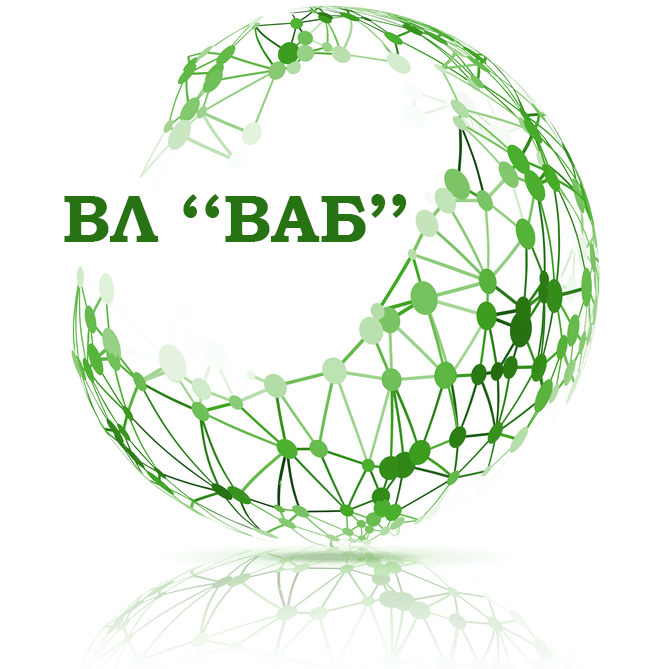
<style>
.page{position:relative;width:669px;height:669px;background:#ffffff}
.page>*{position:absolute;margin:0}
.t1{font:66.7px "BookmanOldStyle-Bold";color:#277212}
</style>
<div class="page">
<p class="t1" style="left:64px;top:194px;width:343px;height:48px">ВЛ ‘‘ВАБ’’</p>
</div>
